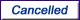
<style>
.page{position:relative;width:80px;height:20px;background:#ffffff}
.page>*{position:absolute;margin:0}
.t1{font:12px "ArialMT";color:#003399;font-weight:bold;font-style:italic}
</style>
<div class="page">
<p class="t1" style="left:12px;top:5px;width:56px;height:10px">Cancelled</p>
</div>
